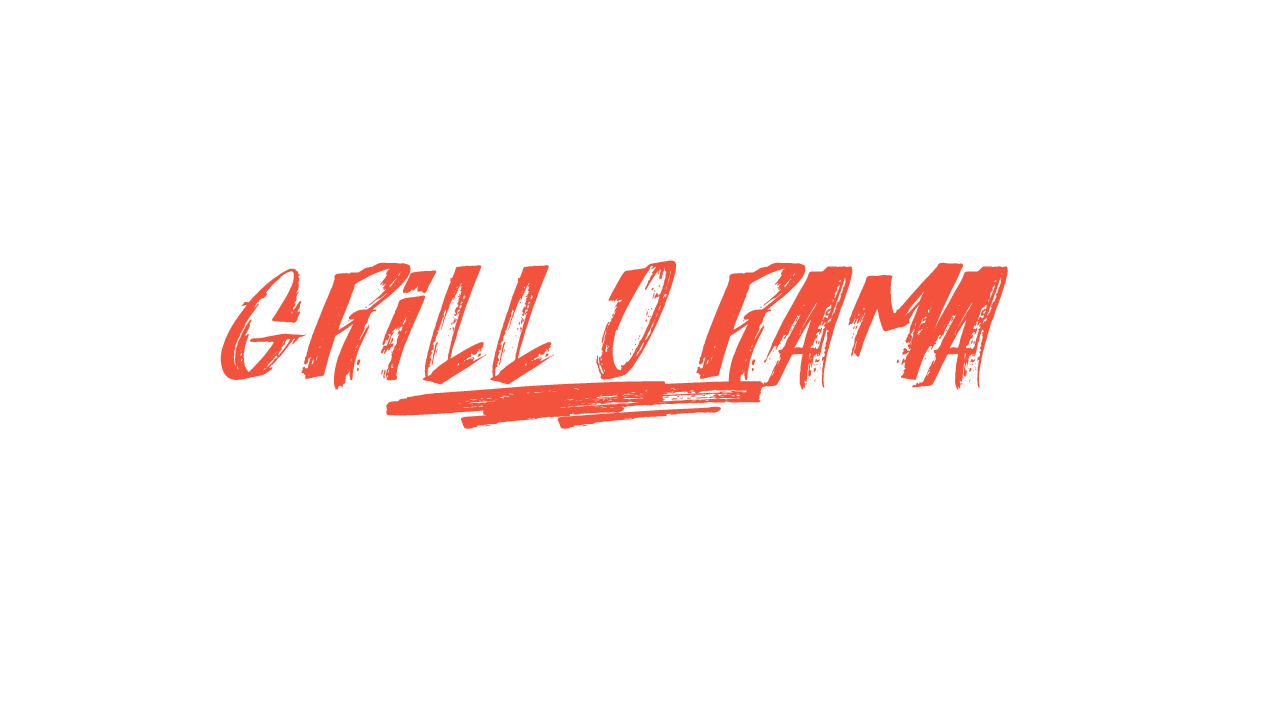
<style>
.page{position:relative;width:1280px;height:720px;background:#ffffff}
.page>*{position:absolute;margin:0}
.t1{font:125px "Italiano-";letter-spacing:0.025em;color:#f3533c}
</style>
<div class="page">
<p class="t1" style="left:220px;top:260px;width:788px;height:169px">grill- o- rama</p>
</div>
